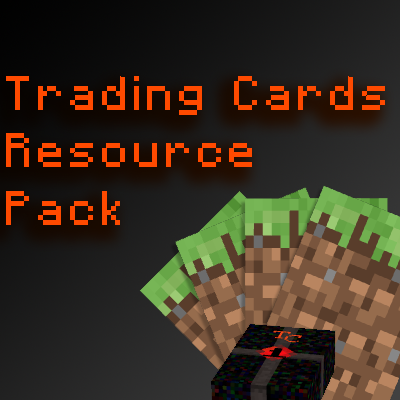
<style>
.page{position:relative;width:400px;height:400px}
.page>*{position:absolute;margin:0}
.t1{font:48px "Minecraft-Regular";letter-spacing:0.1em;color:#ff4a00;scale:0.95 1}
</style>
<div class="page">
<p class="t1" style="left:6px;top:76px;width:379px;height:149px">Trading Cards Resource Pack</p>
</div>
